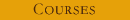
<style>
.page{position:relative;width:130px;height:20px;background:#e6a109}
.page>*{position:absolute;margin:0}
.t1{font:12.5px "Garamond";color:#4c290d}
.t2{font:16.7px "Garamond";color:#4c290d}
</style>
<div class="page">
<p class="t1" style="left:33px;top:3px;width:62px;height:12px"><span class="t2">C </span>O U R S E S</p>
</div>
